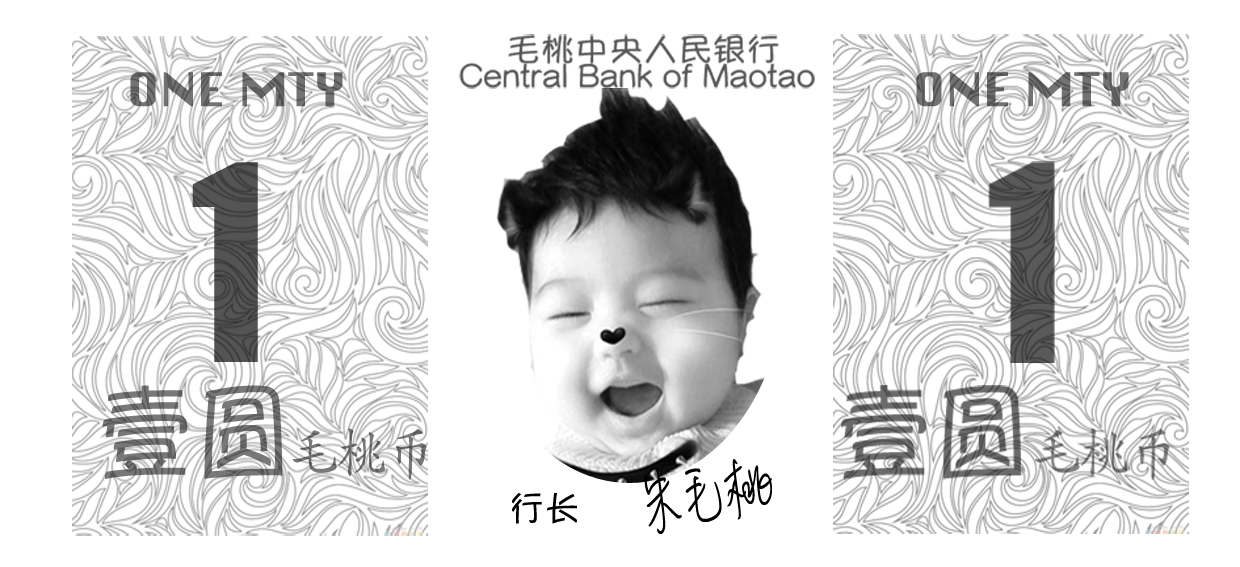
<style>
.page{position:relative;width:1240px;height:567px;background:#ffffff}
.page>*{position:absolute;margin:0}
.t1{font:45.1px "Silom";color:#6b6b6b;scale:1.1 1}
.t2{font:45.1px "Silom";color:#686868;scale:1.1 1}
.t3{font:265.8px "Silom";color:#505050}
.t4{font:109px "YuppySC-Regular";color:#707070;scale:0.9 1}
.t5{font:54.5px "STKaiti";color:#717171;scale:0.9 1}
.t6{font:85.3px "MLingWaiMedium-SC";color:#000000;scale:0.67 1}
.t7{font:35.5px "YuppySC-Regular";color:#000000}
</style>
<div class="page">
<p class="t1" style="left:130px;top:72px;width:213px;height:35px">ONE MTY</p>
<p class="t2" style="left:916px;top:72px;width:213px;height:35px">ONE MTY</p>
<p class="t3" style="left:192px;top:162px;width:66px;height:200px">1</p>
<p class="t4" style="left:102px;top:385px;width:181px;height:94px">壹圆</p>
<p class="t5" style="left:292px;top:428px;width:135px;height:52px">毛桃币</p>
<p class="t6" style="left:644px;top:458px;width:128px;height:76px;rotate:-9deg">朱毛桃</p>
<p class="t7" style="left:512px;top:493px;width:65px;height:31px">行长</p>
</div>
